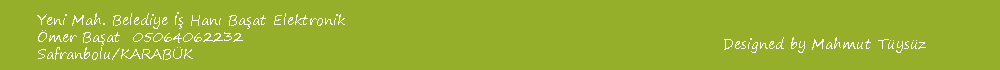
<style>
.page{position:relative;width:1000px;height:70px;background:#95af2a}
.page>*{position:absolute;margin:0}
.t1{font:14px "SegoePrint";color:#f9fbef}
</style>
<div class="page">
<p class="t1" style="left:37px;top:12px;width:308px;height:48px">Yeni Mah. Belediye İş Hanı Başat Elektronik<br>Ömer Başat  05064062232<br>Safranbolu/KARABÜK</p>
<p class="t1" style="left:724px;top:37px;width:202px;height:16px">Designed by Mahmut Tüysüz</p>
</div>
